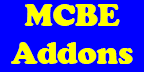
<style>
.page{position:relative;width:144px;height:72px;background:#0000ff}
.page>*{position:absolute;margin:0}
.t1{font:31.5px "CooperBlack";color:#ffff00}
</style>
<div class="page">
<p class="t1" style="left:11px;top:4px;width:122px;height:60px;text-align:center">MCBE<br>Addons</p>
</div>
